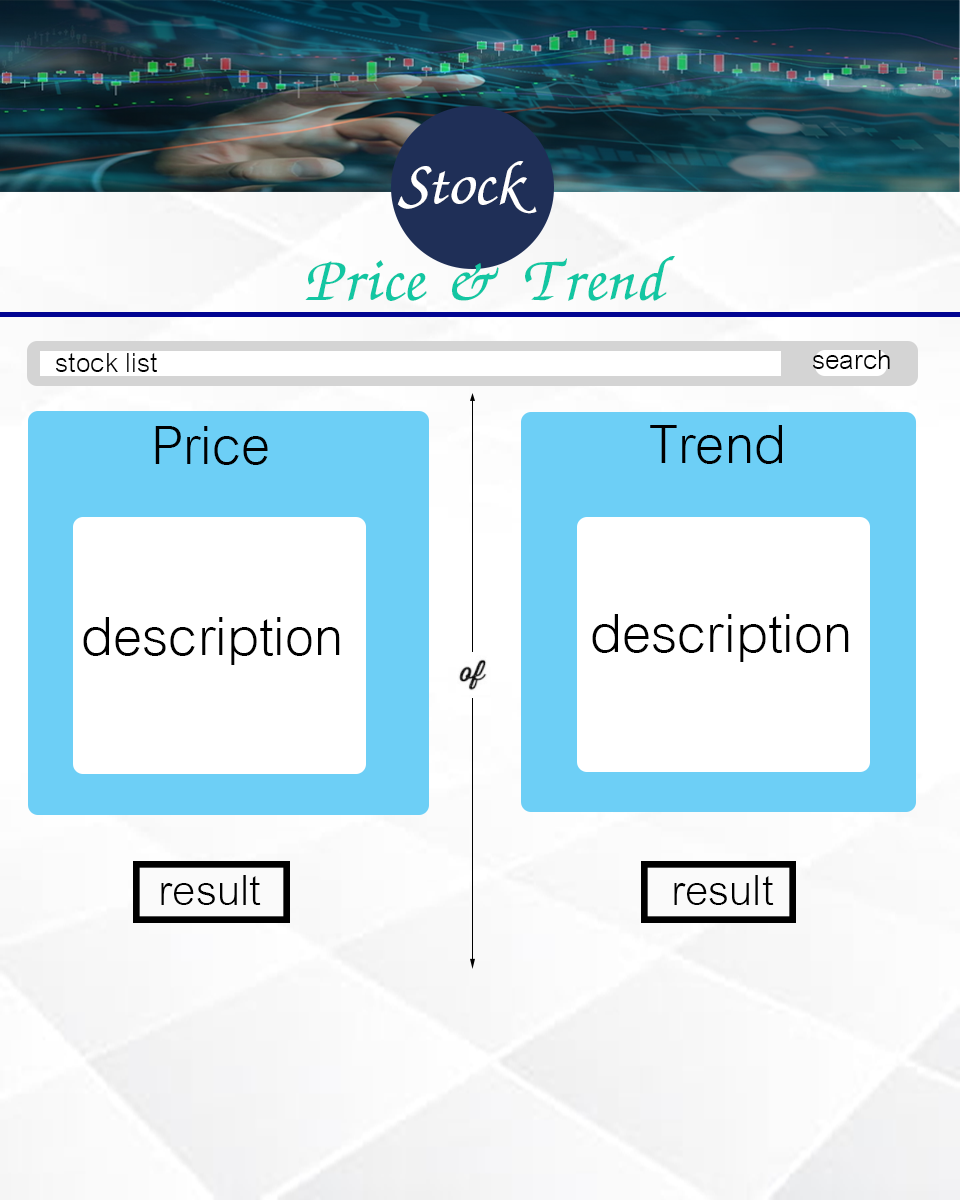
<style>
.page{position:relative;width:960px;height:1200px}
.page>*{position:absolute;margin:0}
.t1{font:40px "CordiaNew";color:#000000}
.t2{font:80px "CordiaNew";color:#000000}
.t3{font:64px "CordiaNew";color:#000000}
</style>
<div class="page">
<p class="t1" style="left:56px;top:353px;width:101px;height:19px">stock list</p>
<p class="t1" style="left:813px;top:350px;width:77px;height:19px">search</p>
<p class="t2" style="left:650px;top:425px;width:132px;height:39px">Trend</p>
<p class="t2" style="left:155px;top:426px;width:113px;height:39px">Price</p>
<p class="t2" style="left:83px;top:617px;width:257px;height:48px">description</p>
<p class="t2" style="left:592px;top:614px;width:257px;height:48px">description</p>
<p class="t3" style="left:161px;top:875px;width:100px;height:30px">result</p>
<p class="t3" style="left:674px;top:875px;width:100px;height:30px">result</p>
</div>
